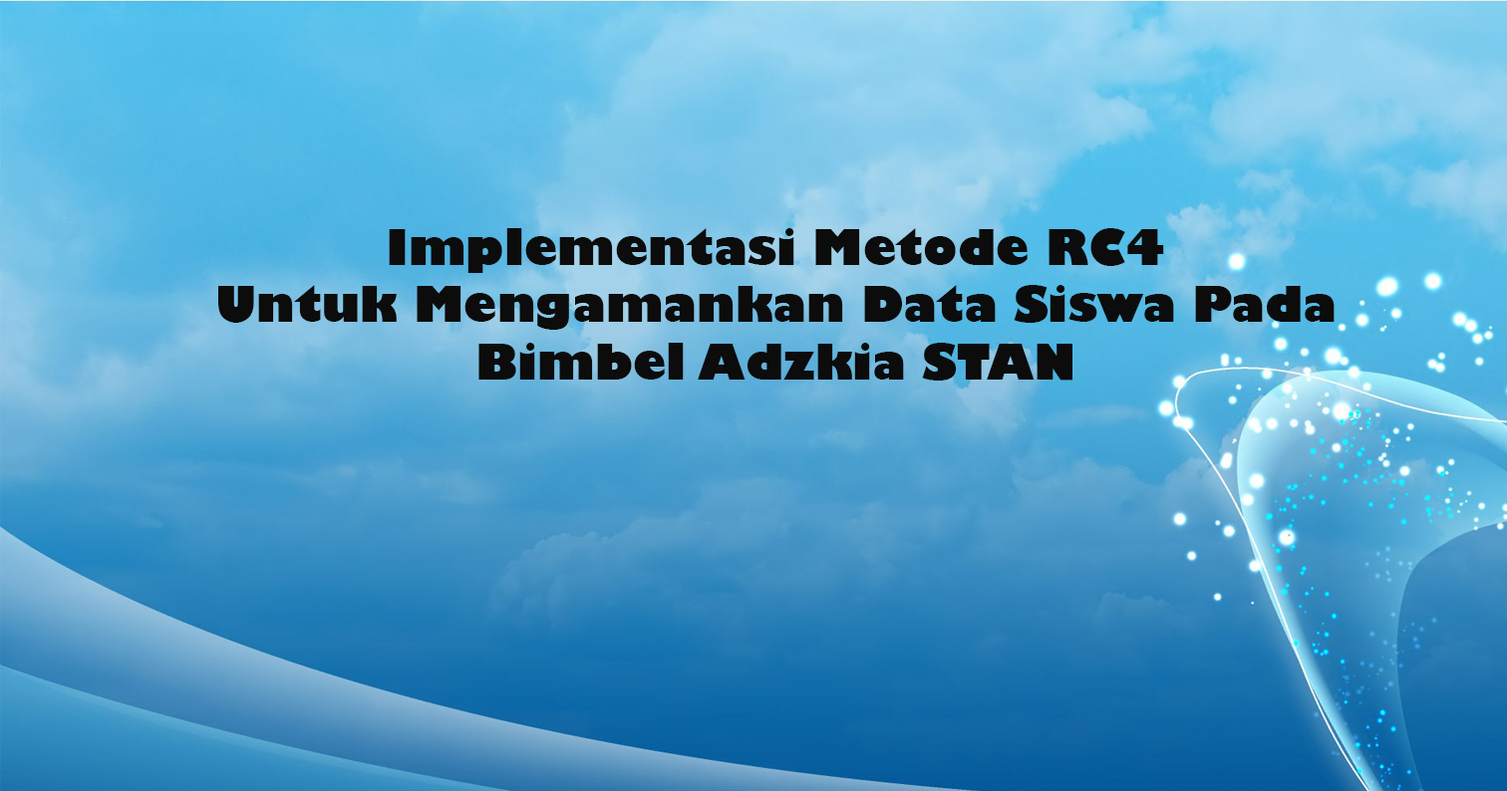
<style>
.page{position:relative;width:1507px;height:791px}
.page>*{position:absolute;margin:0}
.t1{font:47.8px "GillSans-UltraBold";color:#0b0c0b}
</style>
<div class="page">
<p class="t1" style="left:218px;top:228px;width:1116px;height:153px;text-align:center">Implementasi Metode RC4<br>Untuk Mengamankan Data Siswa Pada<br>Bimbel Adzkia STAN</p>
</div>
